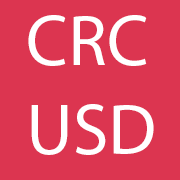
<style>
.page{position:relative;width:180px;height:180px;background:#dc3550}
.page>*{position:absolute;margin:0}
.t1{font:72px "MyriadPro-Regular";color:#ffffff}
</style>
<div class="page">
<p class="t1" style="left:28px;top:15px;width:119px;height:51px">CRC</p>
<p class="t1" style="left:31px;top:104px;width:123px;height:51px">USD</p>
</div>
